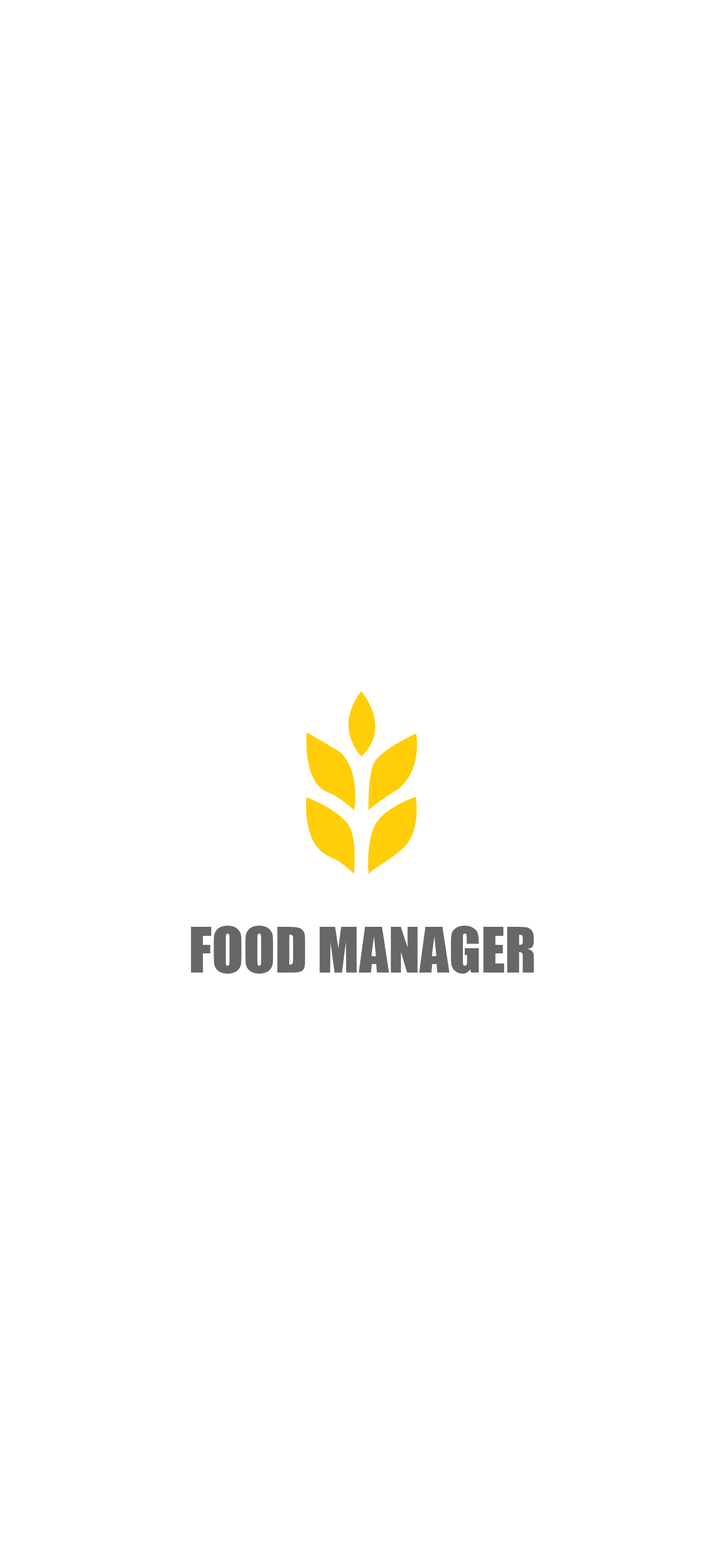
<style>
.page{position:relative;width:725px;height:1568px;background:#ffffff}
.page>*{position:absolute;margin:0}
.t1{font:57.9px "Impact";color:#676767}
</style>
<div class="page">
<p class="t1" style="left:191px;top:926px;width:343px;height:48px">FOOD MANAGER</p>
</div>
